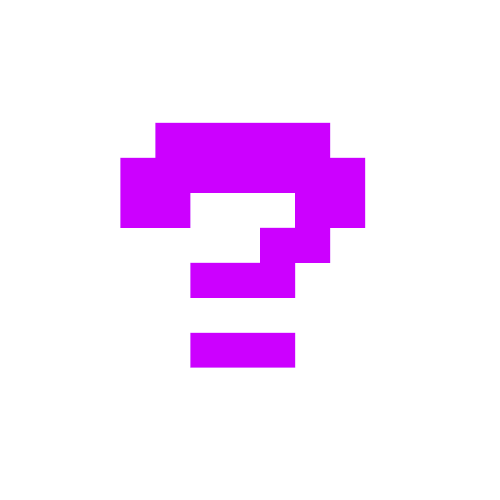
<style>
.page{position:relative;width:500px;height:500px;background:#ffffff}
.page>*{position:absolute;margin:0}
.t1{font:279.8px "PressStart2P-Regular";color:#cc00ff}
</style>
<div class="page">
<p class="t1" style="left:120px;top:122px;width:246px;height:246px">?</p>
</div>
